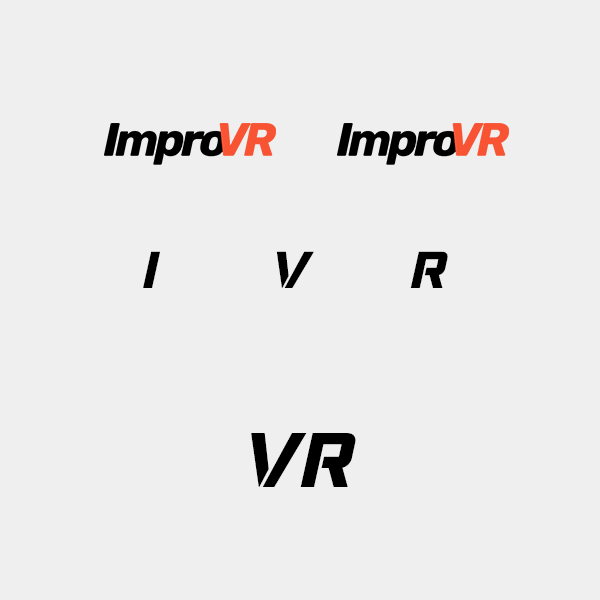
<style>
.page{position:relative;width:600px;height:600px;background:#efefef}
.page>*{position:absolute;margin:0}
.t1{font:54.4px "NikeCombatStencil";letter-spacing:0.2em;color:#000000}
.t2{font:80.9px "NikeCombatStencil";color:#000000}
</style>
<div class="page">
<p class="t1" style="left:143px;top:251px;width:17px;height:37px">i</p>
<p class="t1" style="left:276px;top:251px;width:38px;height:37px">v</p>
<p class="t1" style="left:410px;top:251px;width:38px;height:37px">r</p>
<p class="t2" style="left:251px;top:433px;width:105px;height:54px">VR</p>
</div>
